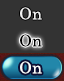
<style>
.page{position:relative;width:64px;height:81px;background:#333333}
.page>*{position:absolute;margin:0}
.t1{font:16px "CenturySchoolbook";letter-spacing:0.025em;color:#f1f1f1}
.t2{font:16px "CenturySchoolbook";letter-spacing:0.025em;color:#000000}
.t3{font:16px "CenturySchoolbook";letter-spacing:0.025em;color:#ffffff}
</style>
<div class="page">
<p class="t1" style="left:20px;top:7px;width:22px;height:13px">On</p>
<p class="t2" style="left:20px;top:34px;width:22px;height:13px">On</p>
<p class="t3" style="left:20px;top:61px;width:22px;height:13px">On</p>
</div>
